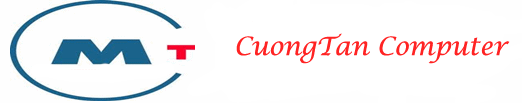
<style>
.page{position:relative;width:522px;height:103px;background:#ffffff}
.page>*{position:absolute;margin:0}
.t1{font:25px "LucidaCalligraphy-Italic";color:#ff2323}
</style>
<div class="page">
<p class="t1" style="left:236px;top:33px;width:274px;height:31px">CuongTan Computer</p>
</div>
